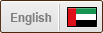
<style>
.page{position:relative;width:103px;height:33px}
.page>*{position:absolute;margin:0}
.t1{font:13px "ArialNarrow-Bold";letter-spacing:-0.01em;color:#7d7d7d;scale:1.1 1}
</style>
<div class="page">
<p class="t1" style="left:11px;top:12px;width:41px;height:13px">English</p>
</div>
